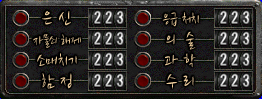
<style>
.page{position:relative;width:262px;height:99px}
.page>*{position:absolute;margin:0}
.t1{font:22px "NanumBrush";color:#e8c898}
.t2{font:16px "NanumBrush";letter-spacing:-0.02em;color:#e8c898}
.t3{font:14.2px "NanumBrush";letter-spacing:-0.025em;color:#e8c898}
.t4{font:18px "NanumBrush";color:#e8c898}
.t5{font:20px "NanumBrush";color:#e8c898}
</style>
<div class="page">
<p class="t1" style="left:42px;top:11px;width:29px;height:15px">은 신</p>
<p class="t2" style="left:162px;top:12px;width:37px;height:15px">응급 처치</p>
<p class="t3" style="left:33px;top:34px;width:48px;height:14px">자물쇠 해제</p>
<p class="t4" style="left:166px;top:31px;width:30px;height:19px">의  술</p>
<p class="t4" style="left:37px;top:53px;width:40px;height:13px">소매치기</p>
<p class="t4" style="left:165px;top:53px;width:31px;height:15px">과 학</p>
<p class="t5" style="left:42px;top:73px;width:30px;height:16px">함 정</p>
<p class="t5" style="left:166px;top:74px;width:28px;height:15px">수 리</p>
</div>
